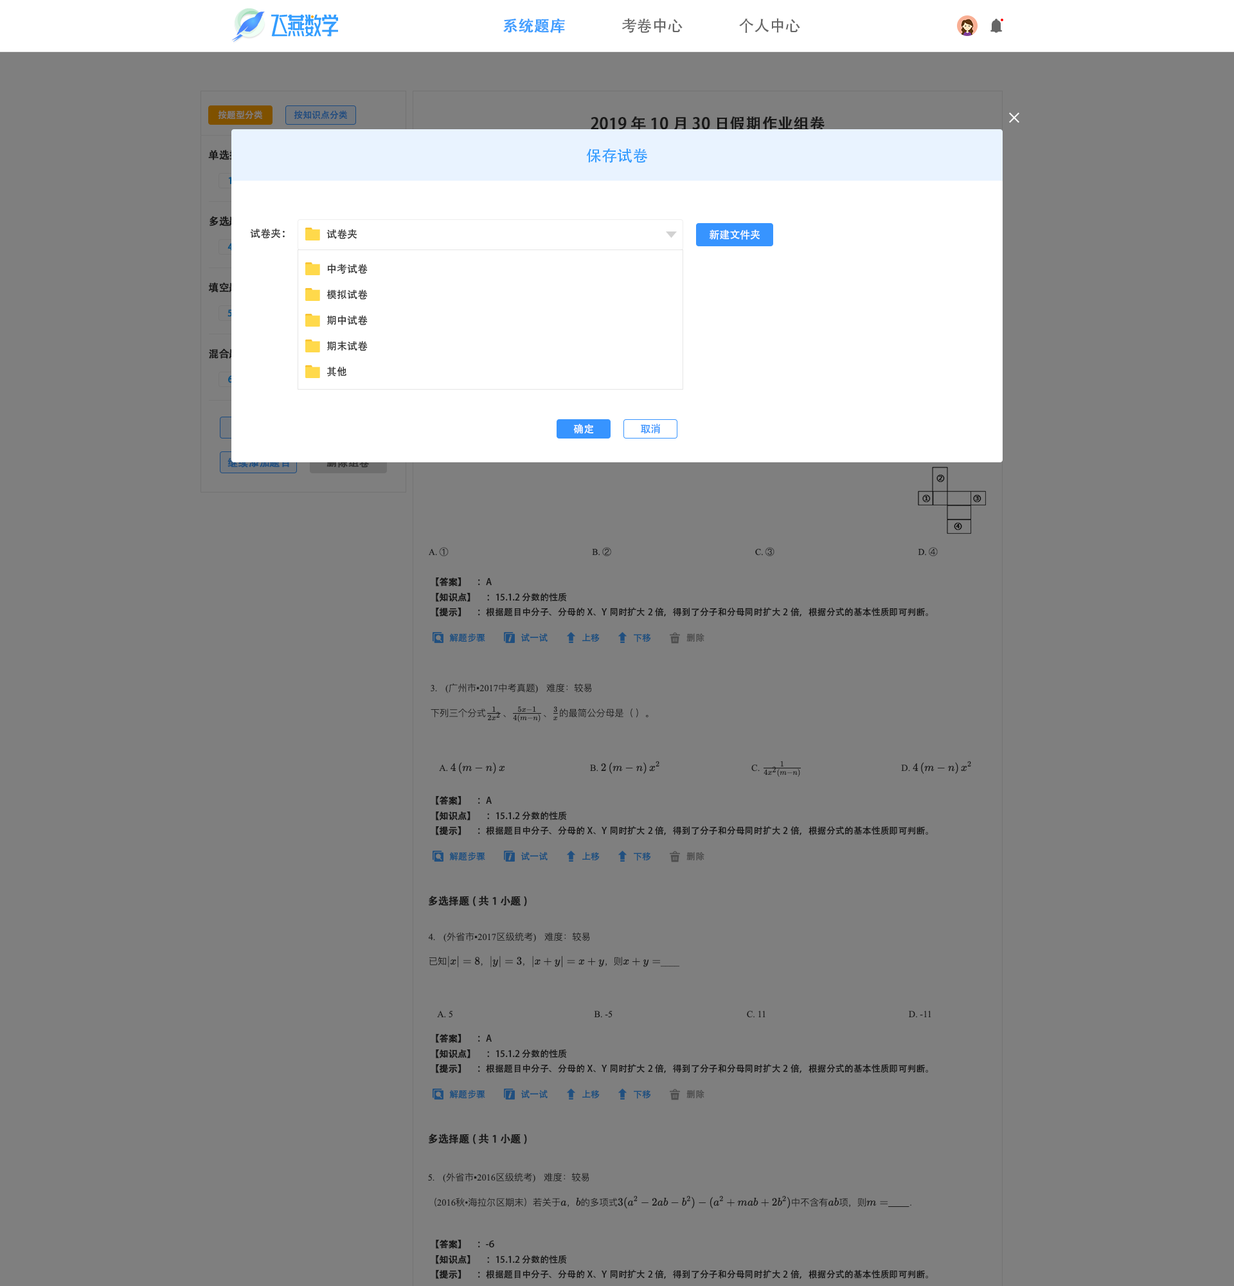
<style>
.page{position:relative;width:1234px;height:1286px;background:#7f7f7f}
.page>*{position:absolute;margin:0}
.t1{font:15.4px "AdobeHeitiStd-Regular";color:#409eff;font-weight:bold}
.t2{font:15.4px "AdobeHeitiStd-Regular";color:#666666}
.t3{font:9px "AdobeHeitiStd-Regular";color:#7f7f7f}
.t4{font:9px "AdobeHeitiStd-Regular";color:#1b4a7f}
.t5{font:15.4px "AdobeHeitiStd-Regular";color:#191919;font-weight:bold}
.t6{font:15.4px "AdobeHeitiStd-Regular";color:#339dff}
.t7{font:9px "AdobeHeitiStd-Regular";color:#024f7f;font-weight:bold}
.t8{font:10.3px "AdobeHeitiStd-Regular";color:#333333}
.t9{font:10.3px "AdobeHeitiStd-Regular";color:#feffff}
.t10{font:9px "AdobeHeitiStd-Regular";font-weight:bold}
.t11{font:10.3px "AdobeHeitiStd-Regular";color:#ffffff}
.t12{font:10.3px "AdobeHeitiStd-Regular";color:#3794ff}
.t13{font:9px "AdobeHeitiStd-Regular";color:#2e2e2e;font-weight:bold}
.t14{font:9px "AdobeHeitiStd-Regular";color:#2e2e2e}
.t15{font:9px "AdobeHeitiStd-Regular";color:#194e7f}
.t16{font:9px "AdobeHeitiStd-Regular";color:#4c4c4c}
.t17{font:10.3px "AdobeHeitiStd-Regular";color:#191919;font-weight:bold}
</style>
<div class="page">
<p class="t1" style="left:503px;top:19px;width:62px;height:14px">系统题库</p>
<p class="t2" style="left:622px;top:18px;width:61px;height:15px">考卷中心</p>
<p class="t2" style="left:739px;top:18px;width:61px;height:15px">个人中心</p>
<p class="t3" style="left:218px;top:110px;width:44px;height:10px">按题型分类</p>
<p class="t4" style="left:294px;top:110px;width:53px;height:10px">按知识点分类</p>
<p class="t5" style="left:591px;top:116px;width:234px;height:15px">2019年10月30日假期作业组卷</p>
<p class="t6" style="left:586px;top:148px;width:62px;height:15px">保存试卷</p>
<p class="t7" style="left:228px;top:177px;width:4px;height:7px">1</p>
<p class="t8" style="left:250px;top:228px;width:35px;height:11px">试卷夹：</p>
<p class="t8" style="left:327px;top:229px;width:30px;height:10px">试卷夹</p>
<p class="t9" style="left:709px;top:230px;width:51px;height:10px">新建文件夹</p>
<p class="t10" style="left:228px;top:243px;width:5px;height:8px">4</p>
<p class="t8" style="left:327px;top:264px;width:41px;height:10px">中考试卷</p>
<p class="t8" style="left:327px;top:289px;width:41px;height:11px">模拟试卷</p>
<p class="t7" style="left:228px;top:309px;width:5px;height:8px">5</p>
<p class="t8" style="left:327px;top:315px;width:41px;height:10px">期中试卷</p>
<p class="t8" style="left:327px;top:341px;width:41px;height:10px">期末试卷</p>
<p class="t10" style="left:228px;top:375px;width:5px;height:8px">6</p>
<p class="t8" style="left:327px;top:366px;width:19px;height:11px">其他</p>
<p class="t11" style="left:573px;top:424px;width:21px;height:10px">确定</p>
<p class="t12" style="left:641px;top:424px;width:20px;height:10px">取消</p>
<p class="t13" style="left:436px;top:577px;width:56px;height:9px">【答案】 <span class="t14">     ：A</span></p>
<p class="t14" style="left:436px;top:593px;width:131px;height:9px"><span class="t13">【知识点】 </span>     ：15.1.2 分数的性质</p>
<p class="t14" style="left:436px;top:607px;width:492px;height:9px"><span class="t13">【提示】 </span>     ：根据题目中分子、分母的X、Y同时扩大2倍，得到了分子和分母同时扩大2倍，根据分式的基本性质即可判断。</p>
<p class="t15" style="left:449px;top:633px;width:36px;height:9px">解题步骤</p>
<p class="t15" style="left:521px;top:633px;width:27px;height:9px">试一试</p>
<p class="t15" style="left:582px;top:633px;width:18px;height:9px">上移</p>
<p class="t15" style="left:634px;top:633px;width:17px;height:9px">下移</p>
<p class="t16" style="left:687px;top:633px;width:18px;height:9px">删除</p>
<p class="t13" style="left:436px;top:796px;width:56px;height:9px">【答案】 <span class="t14">     ：A</span></p>
<p class="t14" style="left:436px;top:811px;width:131px;height:9px"><span class="t13">【知识点】 </span>     ：15.1.2 分数的性质</p>
<p class="t14" style="left:436px;top:825px;width:492px;height:10px"><span class="t13">【提示】 </span>     ：根据题目中分子、分母的X、Y同时扩大2倍，得到了分子和分母同时扩大2倍，根据分式的基本性质即可判断。</p>
<p class="t15" style="left:449px;top:852px;width:36px;height:9px">解题步骤</p>
<p class="t15" style="left:521px;top:852px;width:27px;height:8px">试一试</p>
<p class="t15" style="left:582px;top:852px;width:18px;height:9px">上移</p>
<p class="t15" style="left:634px;top:852px;width:17px;height:9px">下移</p>
<p class="t16" style="left:687px;top:852px;width:18px;height:8px">删除</p>
<p class="t17" style="left:428px;top:896px;width:99px;height:10px">多选择题(共1小题)</p>
<p class="t13" style="left:436px;top:1034px;width:56px;height:9px">【答案】 <span class="t14">     ：A</span></p>
<p class="t14" style="left:436px;top:1049px;width:131px;height:9px"><span class="t13">【知识点】 </span>     ：15.1.2 分数的性质</p>
<p class="t14" style="left:436px;top:1063px;width:492px;height:10px"><span class="t13">【提示】 </span>     ：根据题目中分子、分母的X、Y同时扩大2倍，得到了分子和分母同时扩大2倍，根据分式的基本性质即可判断。</p>
<p class="t15" style="left:449px;top:1090px;width:36px;height:9px">解题步骤</p>
<p class="t15" style="left:521px;top:1090px;width:27px;height:8px">试一试</p>
<p class="t15" style="left:582px;top:1090px;width:18px;height:9px">上移</p>
<p class="t15" style="left:634px;top:1090px;width:17px;height:9px">下移</p>
<p class="t16" style="left:687px;top:1090px;width:18px;height:8px">删除</p>
<p class="t17" style="left:428px;top:1133px;width:99px;height:11px">多选择题(共1小题)</p>
<p class="t13" style="left:436px;top:1239px;width:58px;height:9px">【答案】 <span class="t14">     ：-6</span></p>
<p class="t14" style="left:436px;top:1255px;width:131px;height:9px"><span class="t13">【知识点】 </span>     ：15.1.2 分数的性质</p>
<p class="t14" style="left:436px;top:1269px;width:492px;height:10px"><span class="t13">【提示】 </span>     ：根据题目中分子、分母的X、Y同时扩大2倍，得到了分子和分母同时扩大2倍，根据分式的基本性质即可判断。</p>
</div>
